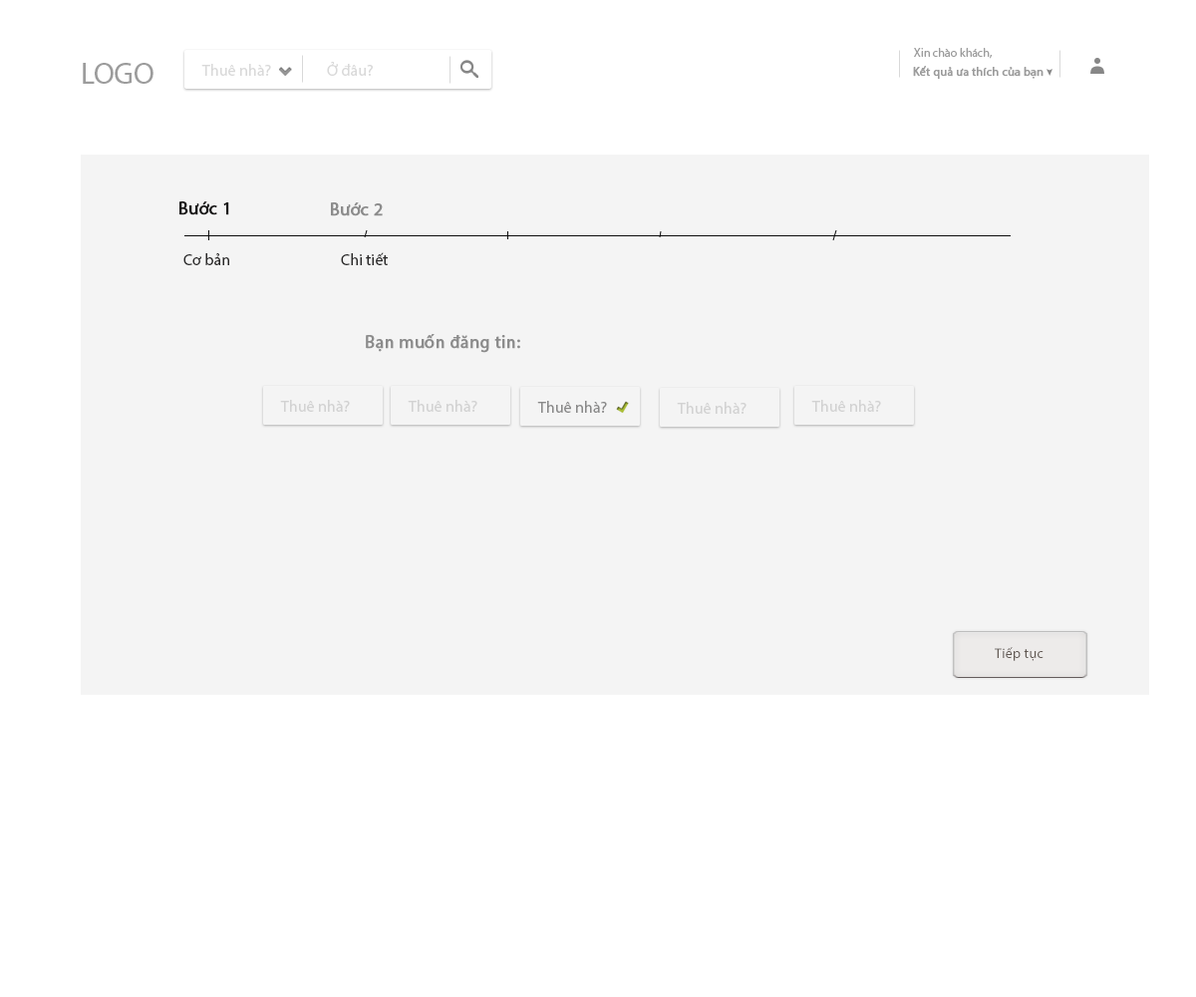
<style>
.page{position:relative;width:1196px;height:997px;background:#ffffff}
.page>*{position:absolute;margin:0}
.t1{font:12px "Tahoma";color:#9c9c9c}
.t2{font:29.9px "MyriadPro-Regular";color:#9c9c9c}
.t3{font:15.9px "MyriadPro-Regular";color:#c3c3c3}
.t4{font:12px "MyriadPro-Regular";color:#9c9c9c;font-weight:bold}
.t5{font:17.9px "MyriadPro-Regular";color:#191818;font-weight:bold}
.t6{font:17.9px "MyriadPro-Regular";color:#8c8c8c;font-weight:bold}
.t7{font:15.9px "Tahoma";color:#201f1f}
.t8{font:15.9px "MyriadPro-Regular";color:#898989}
.t9{font:14px "MyriadPro-Regular";letter-spacing:0.02em;color:#5d534d}
</style>
<div class="page">
<p class="t1" style="left:914px;top:48px;width:79px;height:11px">Xin chào khách,</p>
<p class="t2" style="left:83px;top:63px;width:71px;height:21px">LOGO</p>
<p class="t3" style="left:201px;top:64px;width:70px;height:12px;opacity:0.65">Thuê nhà?</p>
<p class="t3" style="left:327px;top:61px;width:46px;height:15px;opacity:0.65">Ở đâu?</p>
<p class="t4" style="left:913px;top:66px;width:131px;height:14px">Kết quả ưa thích của bạn</p>
<p class="t5" style="left:179px;top:201px;width:50px;height:14px">Bước 1</p>
<p class="t6" style="left:331px;top:202px;width:52px;height:14px">Bước 2</p>
<p class="t7" style="left:183px;top:253px;width:46px;height:12px">Cơ bản</p>
<p class="t7" style="left:341px;top:252px;width:47px;height:13px">Chi tiết</p>
<p class="t6" style="left:366px;top:334px;width:154px;height:19px">Bạn muốn đăng tin:</p>
<p class="t3" style="left:280px;top:400px;width:70px;height:12px;opacity:0.65">Thuê nhà?</p>
<p class="t3" style="left:408px;top:400px;width:69px;height:12px;opacity:0.65">Thuê nhà?</p>
<p class="t8" style="left:537px;top:401px;width:70px;height:12px">Thuê nhà?</p>
<p class="t3" style="left:677px;top:402px;width:70px;height:12px;opacity:0.65">Thuê nhà?</p>
<p class="t3" style="left:811px;top:400px;width:70px;height:12px;opacity:0.65">Thuê nhà?</p>
<p class="t9" style="left:995px;top:647px;width:49px;height:14px">Tiếp tục</p>
</div>
